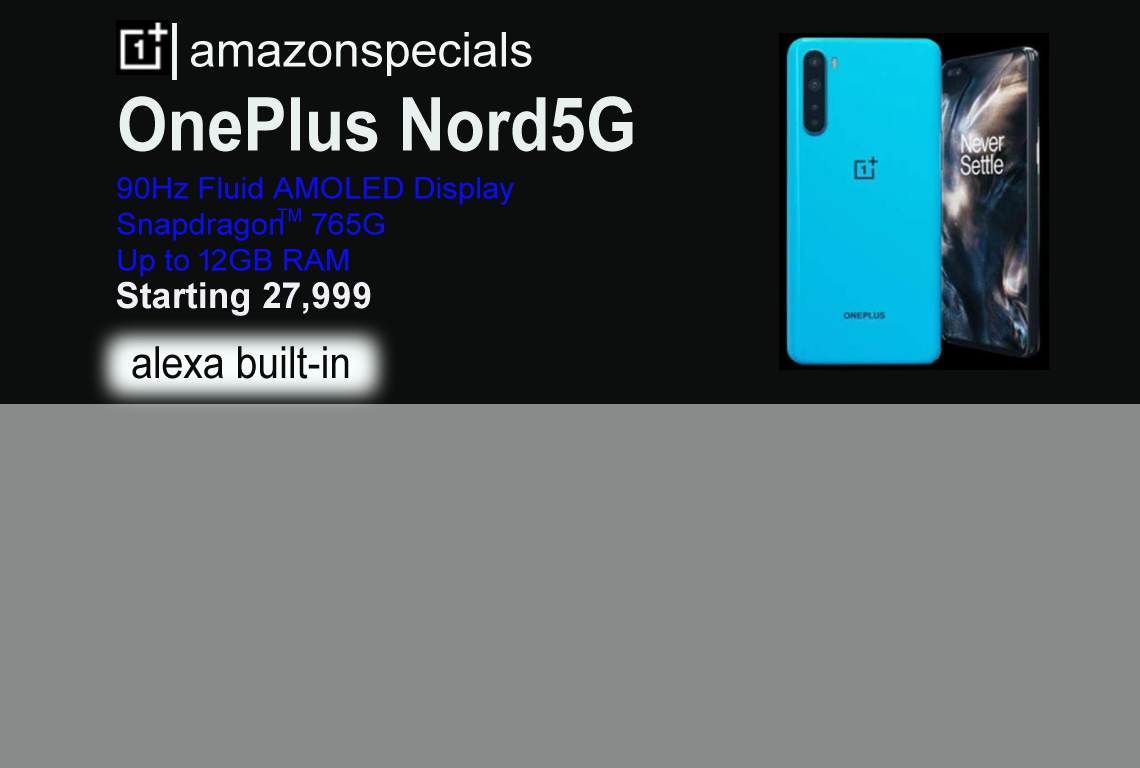
<style>
.page{position:relative;width:1140px;height:768px;background:#878c8b}
.page>*{position:absolute;margin:0}
.t1{font:48px "ArialMT";color:#f0f7f6}
.t2{font:74.3px "Arial-BoldMT";color:#e9f1f0;scale:0.87 1}
.t3{font:30px "ArialMT";color:#0c0cf2;scale:1.04 1}
.t4{font:18px "ArialMT";color:#0c0cf2}
.t5{font:44.3px "ArialMT";color:#0a0a0b;scale:0.88 1}
</style>
<div class="page">
<p class="t1" style="left:191px;top:32px;width:341px;height:44px">amazonspecials</p>
<p class="t2" style="left:119px;top:96px;width:514px;height:56px">OnePlus Nord5G</p>
<p class="t3" style="left:117px;top:176px;width:397px;height:101px">90Hz Fluid AMOLED Display<br>Snapdragon   765G<br>Up to 12GB RAM</p>
<p class="t4" style="left:277px;top:208px;width:24px;height:14px">TM</p>
<p class="t5" style="left:132px;top:346px;width:217px;height:33px">alexa built-in</p>
</div>
